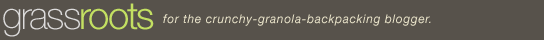
<style>
.page{position:relative;width:544px;height:40px;background:#57524b}
.page>*{position:absolute;margin:0}
.t1{font:38px "HelveticaNeue-Thin";letter-spacing:-0.05em;color:#dddcdc}
.t2{font:38px "HelveticaNeue-Light";letter-spacing:-0.05em;color:#c3e062}
.t3{font:12px "HelveticaNeue-Italic";letter-spacing:0.05em;color:#ebe5cb}
</style>
<div class="page">
<p class="t1" style="left:3px;top:3px;width:151px;height:34px">grass<span class="t2">roots</span></p>
<p class="t3" style="left:163px;top:14px;width:268px;height:12px">for the crunchy-granola-backpacking blogger.</p>
</div>
